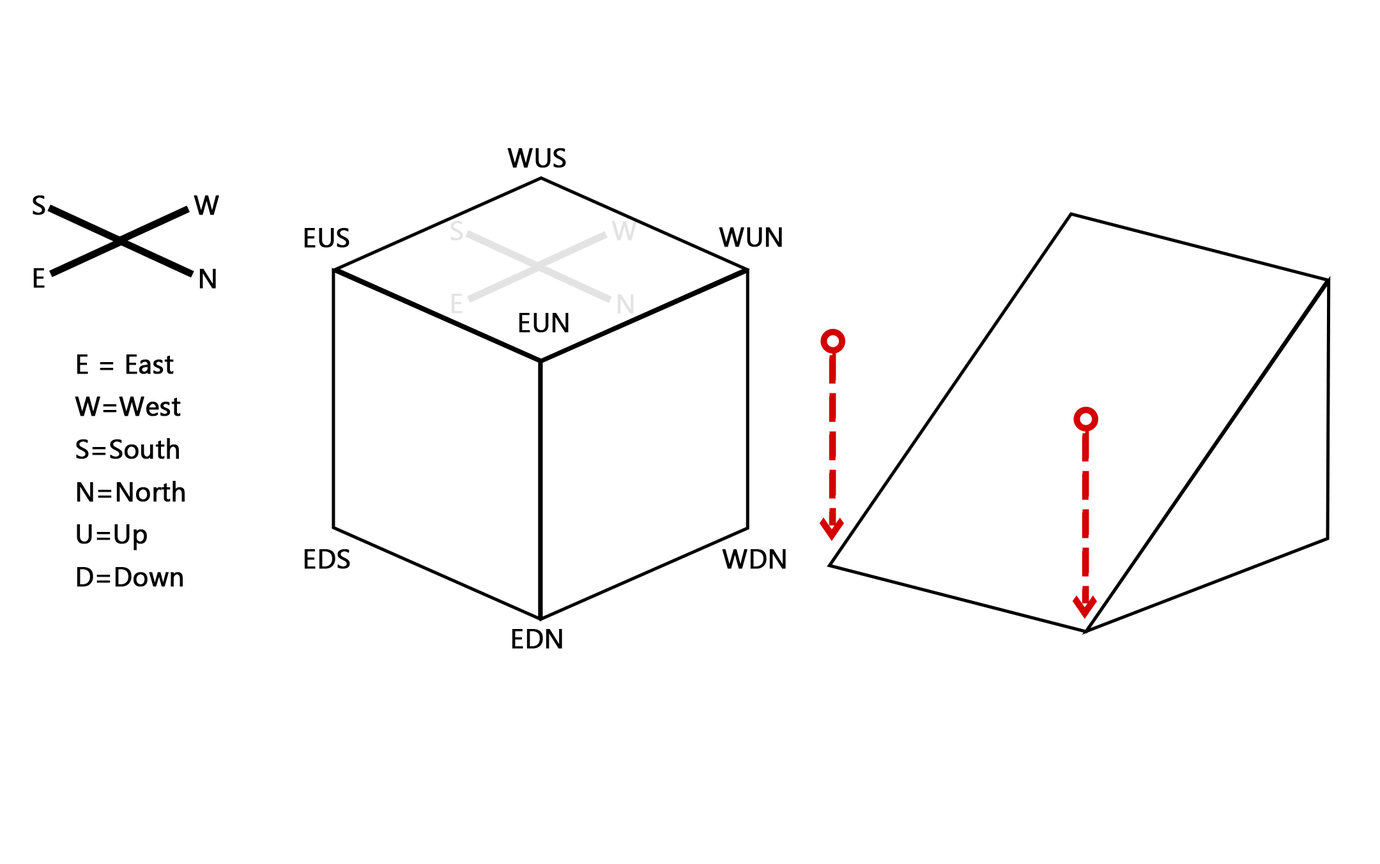
<style>
.page{position:relative;width:1380px;height:864px;background:#ffffff}
.page>*{position:absolute;margin:0}
.t1{font:26.6px "MicrosoftTaiLe";color:#000000;font-weight:bold}
.t2{font:26.6px "MicrosoftTaiLe";color:#e3e3e3;font-weight:bold}
.t3{font:26.6px/42.6px "MicrosoftTaiLe";color:#000000;font-weight:bold}
</style>
<div class="page">
<p class="t1" style="left:507px;top:148px;width:59px;height:20px">WUS</p>
<p class="t1" style="left:33px;top:195px;width:12px;height:20px">S</p>
<p class="t1" style="left:194px;top:195px;width:25px;height:20px">W</p>
<p class="t2" style="left:450px;top:221px;width:13px;height:20px">S</p>
<p class="t2" style="left:611px;top:221px;width:26px;height:20px">W</p>
<p class="t1" style="left:304px;top:228px;width:45px;height:20px">EUS</p>
<p class="t1" style="left:719px;top:227px;width:63px;height:20px">WUN</p>
<p class="t1" style="left:33px;top:268px;width:12px;height:20px">E</p>
<p class="t1" style="left:199px;top:269px;width:17px;height:20px">N</p>
<p class="t2" style="left:451px;top:294px;width:11px;height:20px">E</p>
<p class="t2" style="left:617px;top:294px;width:17px;height:20px">N</p>
<p class="t1" style="left:519px;top:313px;width:50px;height:20px">EUN</p>
<p class="t3" style="left:75px;top:355px;width:110px;height:232px">E = East<br>W=West<br>S=South<br>N=North<br>U=Up<br>D=Down</p>
<p class="t1" style="left:304px;top:549px;width:46px;height:20px">EDS</p>
<p class="t1" style="left:722px;top:549px;width:64px;height:20px">WDN</p>
<p class="t1" style="left:512px;top:629px;width:50px;height:20px">EDN</p>
</div>
